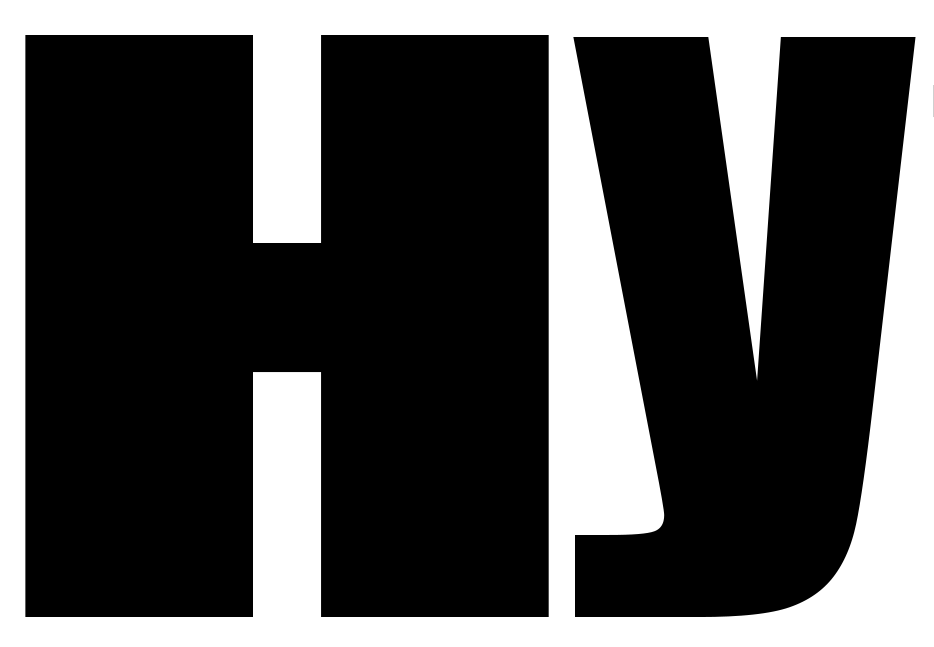
<style>
.page{position:relative;width:934px;height:647px;background:#000000}
.page>*{position:absolute;margin:0}
.t1{font:735.6px "Impact";color:#000000;scale:1.51 1}
.t2{font:785.6px "Impact";color:#000000;scale:0.96 1}
</style>
<div class="page">
<p class="t1" style="left:25px;top:35px;width:524px;height:582px">H</p>
<p class="t2" style="left:573px;top:37px;width:343px;height:580px">y</p>
</div>
